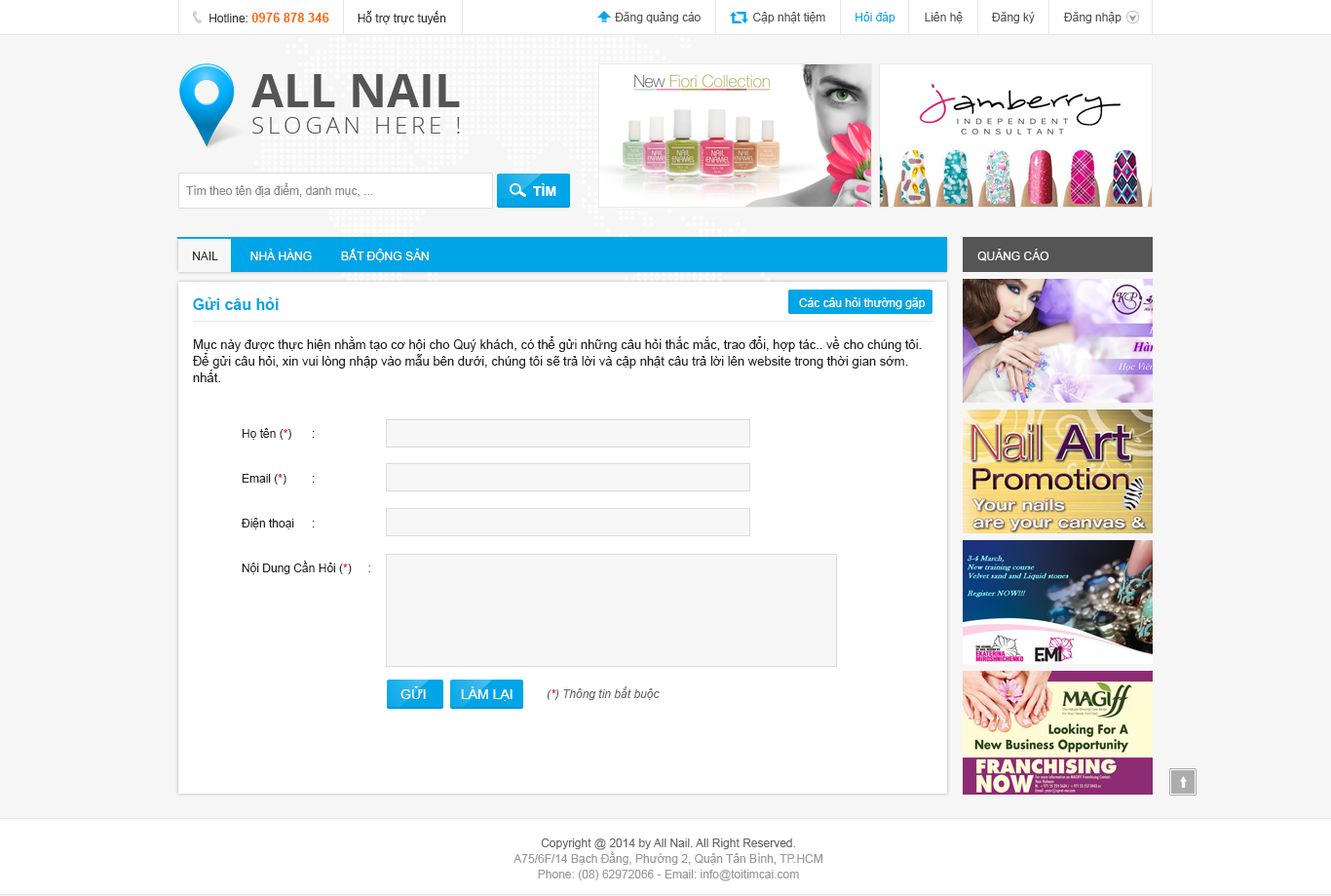
<style>
.page{position:relative;width:1331px;height:896px;background:#ffffff}
.page>*{position:absolute;margin:0}
.t1{font:11.7px "ArialMT";color:#333333}
.t2{font:12.7px "Arial-BoldMT";color:#ff6600;text-transform:uppercase}
.t3{font:11.7px "ArialMT";color:#555555}
.t4{font:11.7px "ArialMT";color:#00a5e7}
.t5{font:46.8px "OpenSans-Bold";color:#555555;text-transform:uppercase}
.t6{font:23.4px "OpenSans-Light";letter-spacing:0.16em;color:#555555;text-transform:uppercase}
.t7{font:11.7px "ArialMT";color:#898888}
.t8{font:13.6px "Arial-BoldMT";color:#ffffff}
.t9{font:11.7px "ArialMT";color:#ffffff;text-transform:uppercase}
.t10{font:11.7px "ArialMT";color:#333333;text-transform:uppercase}
.t11{font:15.6px "Arial-BoldMT";color:#00a5e7}
.t12{font:11.7px "ArialMT";color:#ffffff}
.t13{font:12.7px/16.6px "ArialMT";color:#222222}
.t14{font:11.7px/39px "ArialMT";color:#222222}
.t15{font:11.7px/39px "ArialMT";color:#ff0000}
.t16{font:13.6px "ArialMT";color:#ffffff;text-transform:uppercase}
.t17{font:11.7px "Arial-ItalicMT";color:#666666}
.t18{font:11.7px "Arial-ItalicMT";color:#ff0000}
.t19{font:11.7px/15.6px "ArialMT";color:#999999}
.t20{font:11.7px/15.6px "ArialMT";color:#666666}
</style>
<div class="page">
<p class="t1" style="left:210px;top:11px;width:236px;height:13px">Hotline: <span class="t2">0976 878 346        </span>Hỗ trợ trực tuyến</p>
<p class="t3" style="left:615px;top:12px;width:507px;height:11px">Đăng quảng cáo                Cập nhật tiệm         <span class="t4">Hỏi đáp</span>         Liên hệ         Đăng ký         Đăng nhập</p>
<p class="t5" style="left:251px;top:74px;width:209px;height:33px">all nail</p>
<p class="t6" style="left:252px;top:117px;width:208px;height:17px">Slogan here !</p>
<p class="t7" style="left:186px;top:183px;width:187px;height:14px">Tìm theo tên địa điểm, danh mục, ...</p>
<p class="t8" style="left:533px;top:183px;width:24px;height:13px">TÌM</p>
<p class="t9" style="left:193px;top:249px;width:236px;height:13px"><span class="t10">nail         </span> nhà hàng         Bất động sản</p>
<p class="t9" style="left:978px;top:249px;width:72px;height:12px">quảng cáo</p>
<p class="t11" style="left:193px;top:297px;width:86px;height:13px">Gửi câu hỏi</p>
<p class="t12" style="left:799px;top:297px;width:126px;height:12px">Các câu hỏi thường gặp</p>
<p class="t13" style="left:192px;top:336px;width:730px;height:46px">Mục này được thực hiện nhằm tạo cơ hội cho Quý khách, có thể gửi những câu hỏi thắc mắc, trao đổi, hợp tác.. về cho chúng tôi. Để gửi câu hỏi, xin vui lòng nhập vào mẫu bên dưới, chúng tôi sẽ trả lời và cập nhật câu trả lời lên website trong thời gian sớm. nhất.</p>
<p class="t14" style="left:241px;top:428px;width:129px;height:146px">Họ tên (<span class="t15">*</span>)  :  <br>Email (<span class="t15">*</span>)  :  <br>Điện thoại  :  <br>Nội Dung Cần Hỏi (<span class="t15">*</span>)     :</p>
<p class="t16" style="left:401px;top:686px;width:25px;height:13px">gửi</p>
<p class="t16" style="left:461px;top:686px;width:52px;height:15px">làm lại</p>
<p class="t17" style="left:547px;top:686px;width:113px;height:14px">(<span class="t18">*</span>) Thông tin bắt buộc</p>
<p class="t19" style="left:514px;top:838px;width:309px;height:43px;text-align:center"><span class="t20">Copyright @ 2014 by All Nail. All Right Reserved.<br></span>A75/6F/14 Bạch Đằng, Phường 2, Quận Tân Bình, TP.HCM<br>Phone: (08) 62972066 - Email: info@toitimcai.com</p>
</div>
